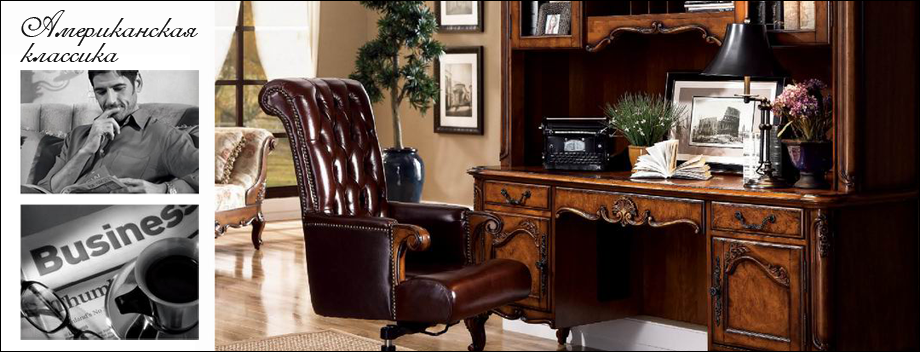
<style>
.page{position:relative;width:920px;height:352px}
.page>*{position:absolute;margin:0}
.t1{font:28.1px/25.6px "RomanaScript";color:#111111}
</style>
<div class="page">
<p class="t1" style="left:20px;top:10px;width:178px;height:52px">Американская<br>классика</p>
</div>
